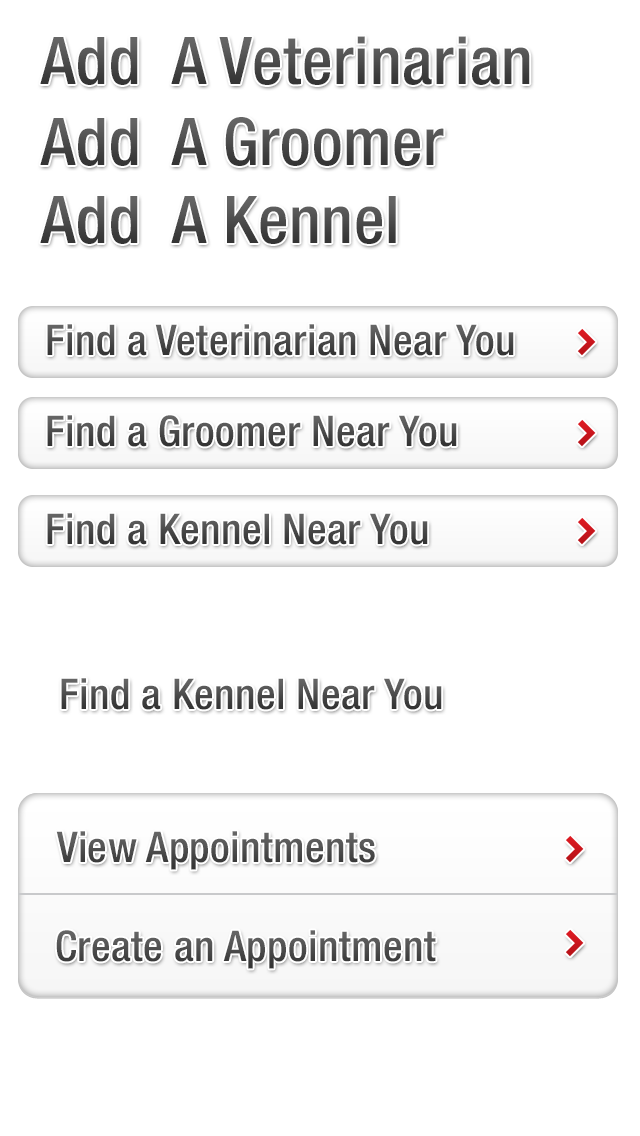
<style>
.page{position:relative;width:640px;height:1136px;background:#ffffff}
.page>*{position:absolute;margin:0}
.t1{font:65.9px "HelveticaNeueLTStd-MdCn";letter-spacing:0.01em;color:#494949}
.t2{font:65.9px "HelveticaNeueLTStd-MdCn";letter-spacing:0.01em;color:#484848}
.t3{font:65.9px "HelveticaNeueLTStd-MdCn";letter-spacing:0.01em;color:#4a4a4a}
.t4{font:42.5px "HelveticaNeueLTStd-MdCn";letter-spacing:0.01em;color:#474747}
.t5{font:42.5px "HelveticaNeueLTStd-MdCn";letter-spacing:0.01em;color:#494949}
.t6{font:42.5px "HelveticaNeueLTStd-MdCn";letter-spacing:0.01em;color:#4e4e4e}
</style>
<div class="page">
<p class="t1" style="left:40px;top:36px;width:490px;height:49px">Add  A Veterinarian</p>
<p class="t2" style="left:40px;top:117px;width:404px;height:49px">Add  A Groomer</p>
<p class="t3" style="left:40px;top:196px;width:356px;height:48px">Add  A Kennel</p>
<p class="t4" style="left:47px;top:324px;width:467px;height:32px">Find a Veterinarian Near You</p>
<p class="t4" style="left:47px;top:415px;width:410px;height:32px">Find a Groomer Near You</p>
<p class="t5" style="left:47px;top:513px;width:381px;height:32px">Find a Kennel Near You</p>
<p class="t5" style="left:61px;top:678px;width:381px;height:32px">Find a Kennel Near You</p>
<p class="t6" style="left:56px;top:831px;width:319px;height:39px">View Appointments</p>
<p class="t6" style="left:56px;top:930px;width:380px;height:39px">Create an Appointment</p>
</div>
